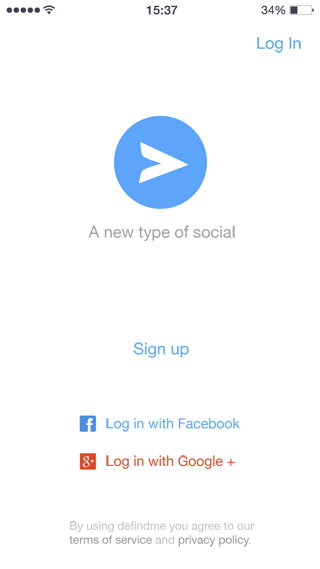
<style>
.page{position:relative;width:320px;height:569px;background:#ffffff}
.page>*{position:absolute;margin:0}
.t1{font:16.2px "HelveticaNeue";color:#5aa4fa}
.t2{font:16.2px "HelveticaNeue";color:#a1a1a1}
.t3{font:13.9px "HelveticaNeue";color:#5aa4fa}
.t4{font:13.9px "HelveticaNeue";color:#e14929}
.t5{font:11.6px "HelveticaNeue";color:#c0c0c0}
.t6{font:11.6px "HelveticaNeue";color:#959595}
.t7{font:11.6px "HelveticaNeue";color:#949494}
</style>
<div class="page">
<p class="t1" style="left:257px;top:37px;width:44px;height:16px">Log In</p>
<p class="t2" style="left:88px;top:225px;width:147px;height:16px">A new type of social</p>
<p class="t1" style="left:133px;top:342px;width:56px;height:16px">Sign up</p>
<p class="t3" style="left:106px;top:418px;width:134px;height:14px">Log in with Facebook</p>
<p class="t4" style="left:106px;top:455px;width:129px;height:14px">Log in with Google +</p>
<p class="t5" style="left:69px;top:521px;width:186px;height:26px">By using defindme you agree to our<br><span class="t6">terms of service</span> and <span class="t7">privacy policy</span>.</p>
</div>
